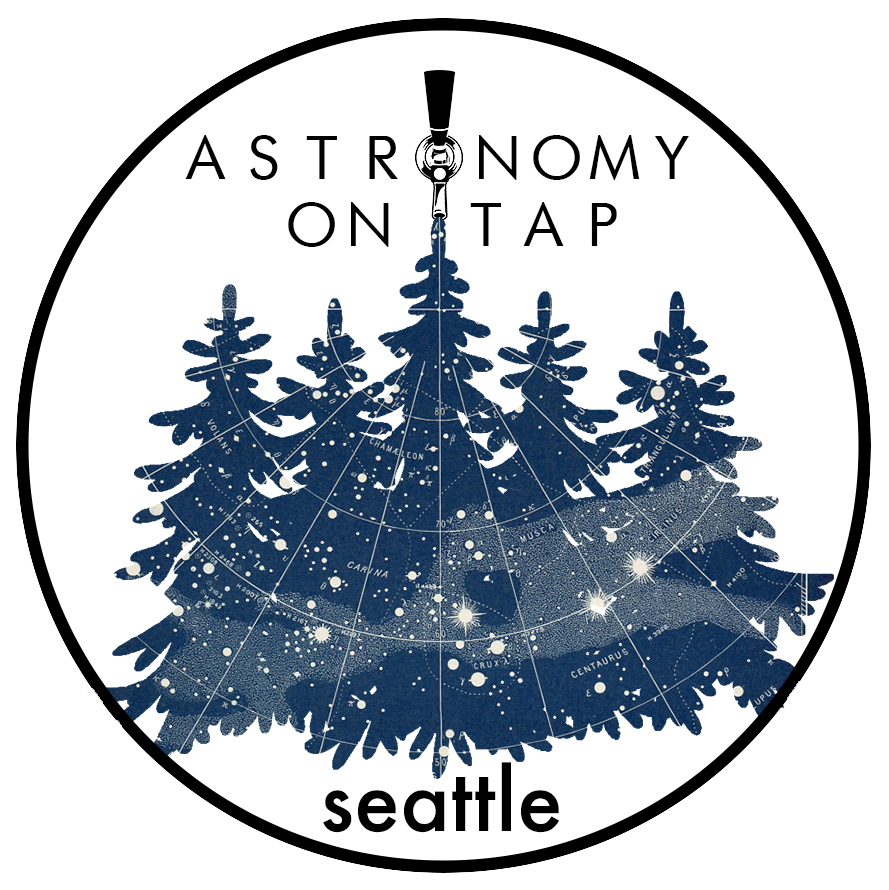
<style>
.page{position:relative;width:889px;height:890px;background:#ffffff}
.page>*{position:absolute;margin:0}
.t1{font:58.3px "FuturistFixedWidth-Regular";color:#000000}
.t2{font:83.3px "Futura-Medium";color:#000000}
</style>
<div class="page">
<p class="t1" style="left:185px;top:135px;width:504px;height:45px">ASTR NOMY</p>
<p class="t1" style="left:288px;top:202px;width:329px;height:45px">ON TAP</p>
<p class="t2" style="left:323px;top:762px;width:237px;height:71px">seattle</p>
</div>
